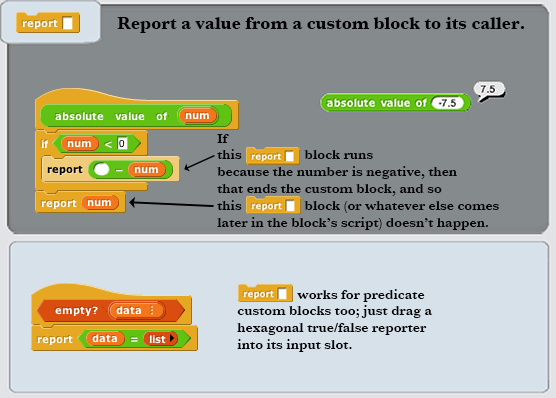
<style>
.page{position:relative;width:556px;height:398px;background:#858a8c}
.page>*{position:absolute;margin:0}
.t1{font:18px "Baskerville-Bold";color:#000000}
.t2{font:14px "Baskerville-SemiBold";color:#000000}
.t3{font:12px "Baskerville-SemiBold";color:#858a8c}
</style>
<div class="page">
<p class="t1" style="left:117px;top:17px;width:407px;height:16px">Report a value from a custom block to its caller.</p>
<p class="t2" style="left:217px;top:134px;width:282px;height:96px">If<br>this                  block runs<br>because the number is negative, then<br>that ends the custom block, and so<br>this                  block (or whatever else comes<br>later in the block’s script) doesn’t happen.</p>
<p class="t2" style="left:237px;top:289px;width:196px;height:63px"><span class="t3">                    </span>works for predicate<br>custom blocks too; just drag a<br>hexagonal true/false reporter<br>into its input slot.</p>
</div>
